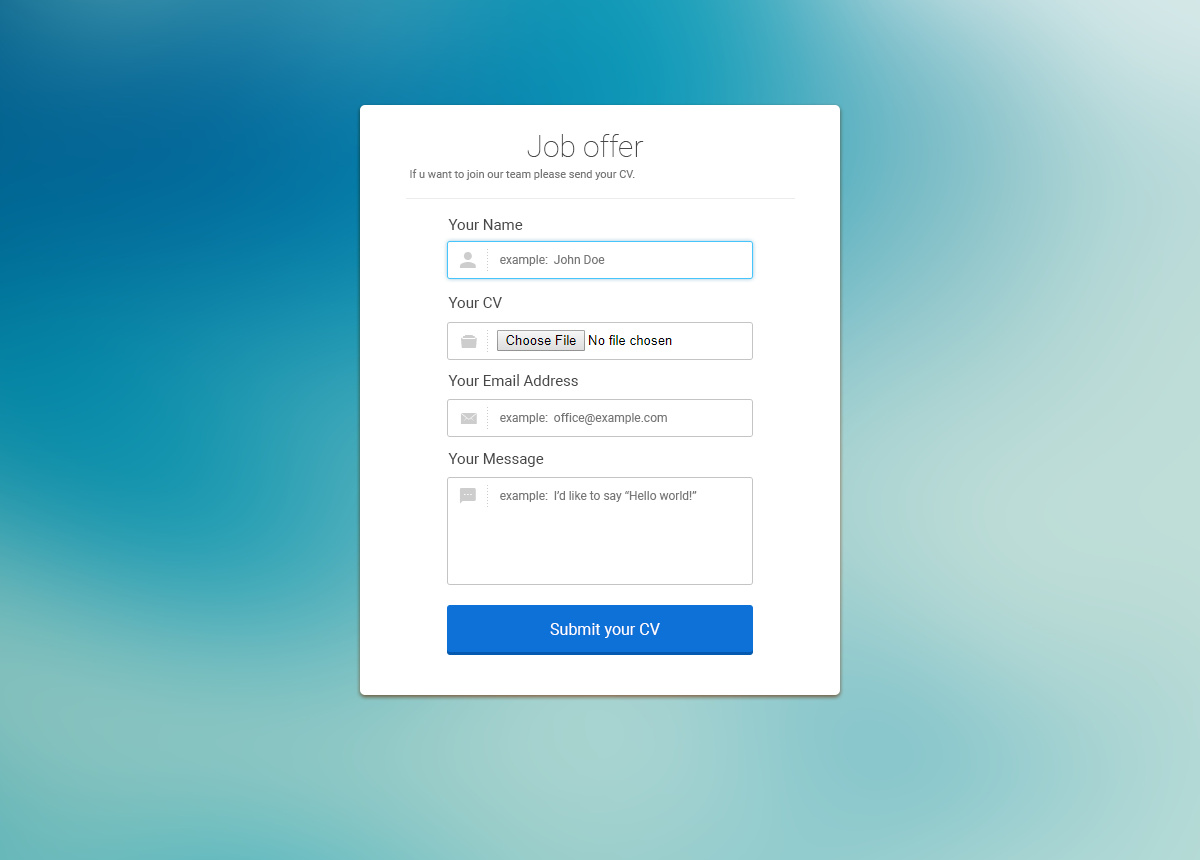
<style>
.page{position:relative;width:1200px;height:860px;background:#ffffff}
.page>*{position:absolute;margin:0}
.t1{font:30px "Roboto-Thin";color:#484848}
.t2{font:11px "Roboto-Regular";color:#767676}
.t3{font:15px/78px "Roboto-Regular";color:#484848}
.t4{font:15px "Roboto-Regular";color:#484848}
.t5{font:12px "Roboto-Regular";color:#777777}
.t6{font:16px "Roboto-Regular";color:#ffffff}
</style>
<div class="page">
<p class="t1" style="left:527px;top:134px;width:117px;height:23px">Job offer</p>
<p class="t2" style="left:410px;top:169px;width:225px;height:11px">If u want to join our team please send your CV.</p>
<p class="t3" style="left:448px;top:219px;width:130px;height:248px"><span class="t4">Your Name</span><br>Your CV<br>Your Email Address<br>Your Message</p>
<p class="t5" style="left:500px;top:255px;width:105px;height:11px">example:  John Doe</p>
<p class="t5" style="left:500px;top:413px;width:167px;height:12px">example:  office@example.com</p>
<p class="t5" style="left:500px;top:491px;width:197px;height:11px">example:  I’d like to say “Hello world!”</p>
<p class="t6" style="left:550px;top:623px;width:110px;height:15px">Submit your CV</p>
</div>
